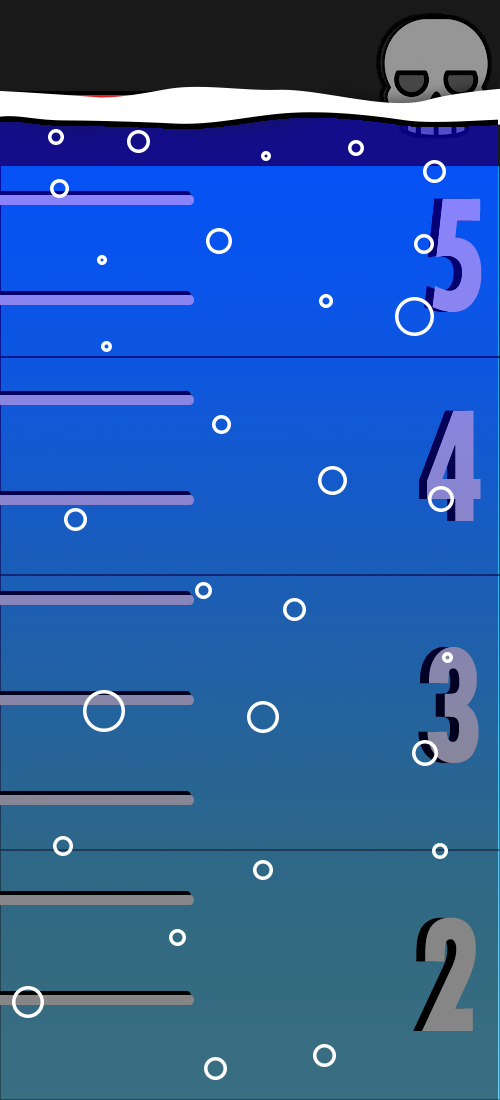
<style>
.page{position:relative;width:500px;height:1100px}
.page>*{position:absolute;margin:0}
.t1{font:169px "TwCenMT-CondensedExtraBold";letter-spacing:-0.04em;color:#8883f3;scale:0.8 1}
.t2{font:169px "TwCenMT-CondensedExtraBold";letter-spacing:-0.04em;color:#8983f6;scale:0.8 1}
.t3{font:169.4px "TwCenMT-CondensedExtraBold";letter-spacing:-0.04em;color:#8985d5;scale:0.8 1}
.t4{font:169.4px "TwCenMT-CondensedExtraBold";letter-spacing:-0.04em;color:#8786a6;scale:0.8 1}
.t5{font:169.4px "TwCenMT-CondensedExtraBold";letter-spacing:-0.04em;scale:0.8 1}
.t6{font:169.4px "TwCenMT-CondensedExtraBold";letter-spacing:-0.04em;color:#868686;scale:0.8 1}
</style>
<div class="page">
<p class="t1" style="left:424px;top:198px;width:50px;height:114px">5</p>
<p class="t2" style="left:432px;top:198px;width:50px;height:114px">5</p>
<p class="t3" style="left:427px;top:410px;width:54px;height:111px">4</p>
<p class="t4" style="left:427px;top:647px;width:52px;height:116px">3</p>
<p class="t5" style="left:413px;top:917px;width:54px;height:114px">2</p>
<p class="t6" style="left:422px;top:917px;width:54px;height:114px">2</p>
</div>
